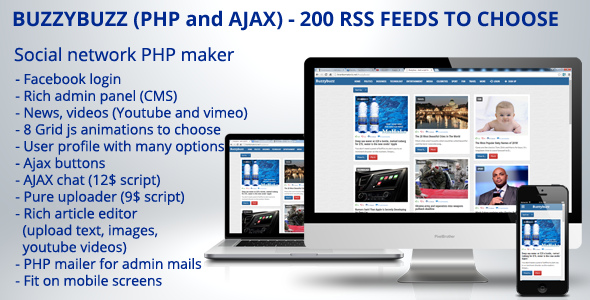
<style>
.page{position:relative;width:590px;height:300px}
.page>*{position:absolute;margin:0}
.t1{font:20px "OpenSans-Bold";color:#002990}
.t2{font:18px "OpenSans";color:#002990}
.t3{font:14px "OpenSans";color:#002990}
</style>
<div class="page">
<p class="t1" style="left:13px;top:10px;width:545px;height:21px">BUZZYBUZZ (PHP and AJAX) - 200 RSS FEEDS TO CHOOSE</p>
<p class="t2" style="left:14px;top:47px;width:221px;height:15px">Social network PHP maker</p>
<p class="t3" style="left:15px;top:73px;width:233px;height:213px">- Facebook login<br>- Rich admin panel (CMS)<br>- News, videos (Youtube and vimeo)<br>- 8 Grid js animations to choose<br>- User profile with many options<br>- Ajax buttons <br>- AJAX chat (12$ script)<br>- Pure uploader (9$ script)<br>- Rich article editor <br>  (upload text, images, <br>  youtube videos)<br>- PHP mailer for admin mails<br>- Fit on mobile screens</p>
</div>
